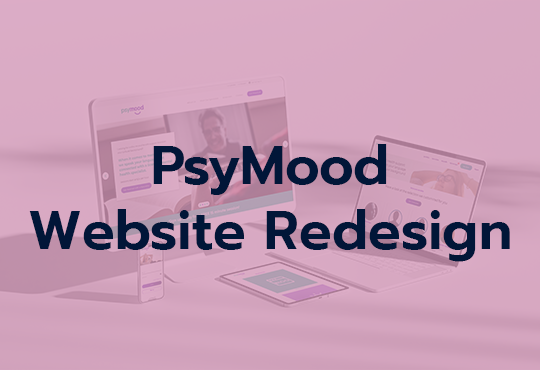
<style>
.page{position:relative;width:540px;height:370px}
.page>*{position:absolute;margin:0}
.t1{font:54.2px "Prompt-SemiBold";color:#011638}
</style>
<div class="page">
<p class="t1" style="left:29px;top:144px;width:481px;height:118px;text-align:center">PsyMood<br>Website Redesign</p>
</div>
